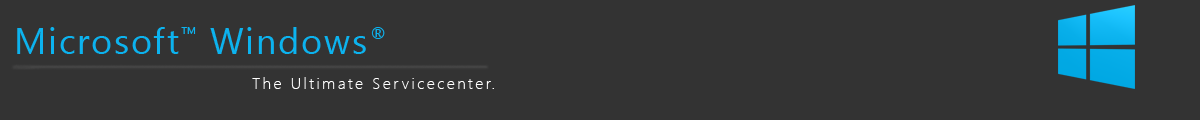
<style>
.page{position:relative;width:1200px;height:120px;background:#333333}
.page>*{position:absolute;margin:0}
.t1{font:36px "SegoeUI";letter-spacing:0.05em;color:#0cb3ef}
.t2{font:16px "SegoeUI-Light";letter-spacing:0.15em;color:#ffffff}
</style>
<div class="page">
<p class="t1" style="left:17px;top:27px;width:368px;height:27px">Microsoft™ Windows®</p>
<p class="t2" style="left:252px;top:77px;width:242px;height:12px">The Ultimate Servicecenter.</p>
</div>
